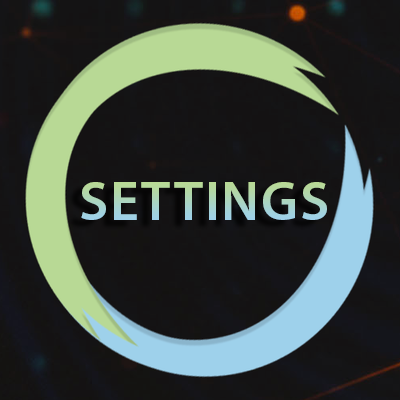
<style>
.page{position:relative;width:400px;height:400px}
.page>*{position:absolute;margin:0}
.t1{font:56px "MyriadPro-Semibold";letter-spacing:0.03em}
</style>
<div class="page">
<p class="t1" style="left:81px;top:182px;width:246px;height:38px">SETTINGS</p>
</div>
